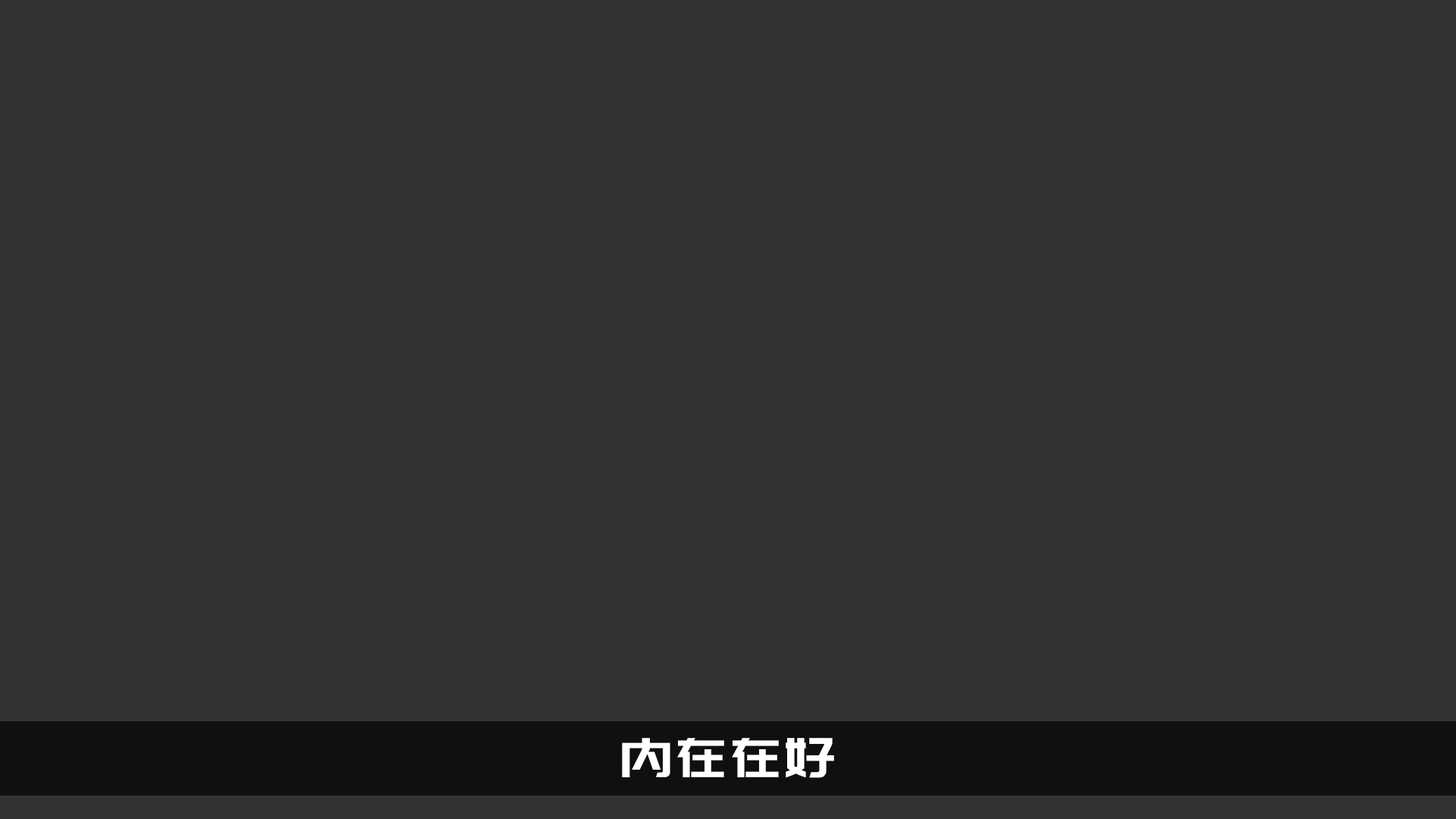
<style>
.page{position:relative;width:1456px;height:819px;background:#333333}
.page>*{position:absolute;margin:0}
.t1{font:54.6px "PangMenZhengDao-3";color:#ffffff}
</style>
<div class="page">
<p class="t1" style="left:622px;top:738px;width:212px;height:40px">内在在好</p>
</div>
